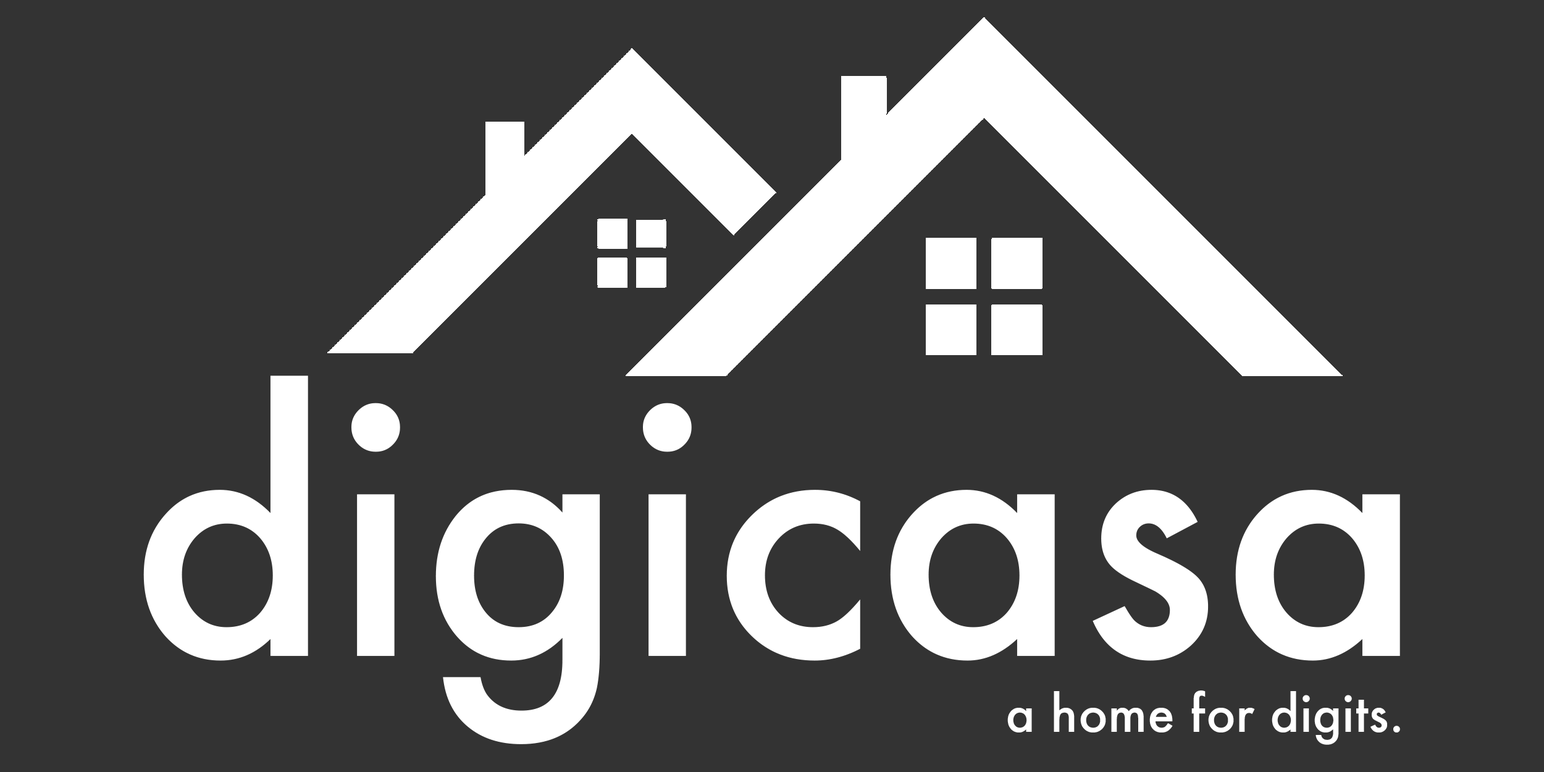
<style>
.page{position:relative;width:1544px;height:772px;background:#333333}
.page>*{position:absolute;margin:0}
.t1{font:339.7px "Futura-Medium";letter-spacing:0.005em;color:#ffffff}
.t2{font:49.4px "Futura-Medium";letter-spacing:0.005em;color:#ffffff}
</style>
<div class="page">
<p class="t1" style="left:143px;top:376px;width:1257px;height:368px">digicasa</p>
<p class="t2" style="left:1008px;top:691px;width:392px;height:54px">a home for digits.</p>
</div>
